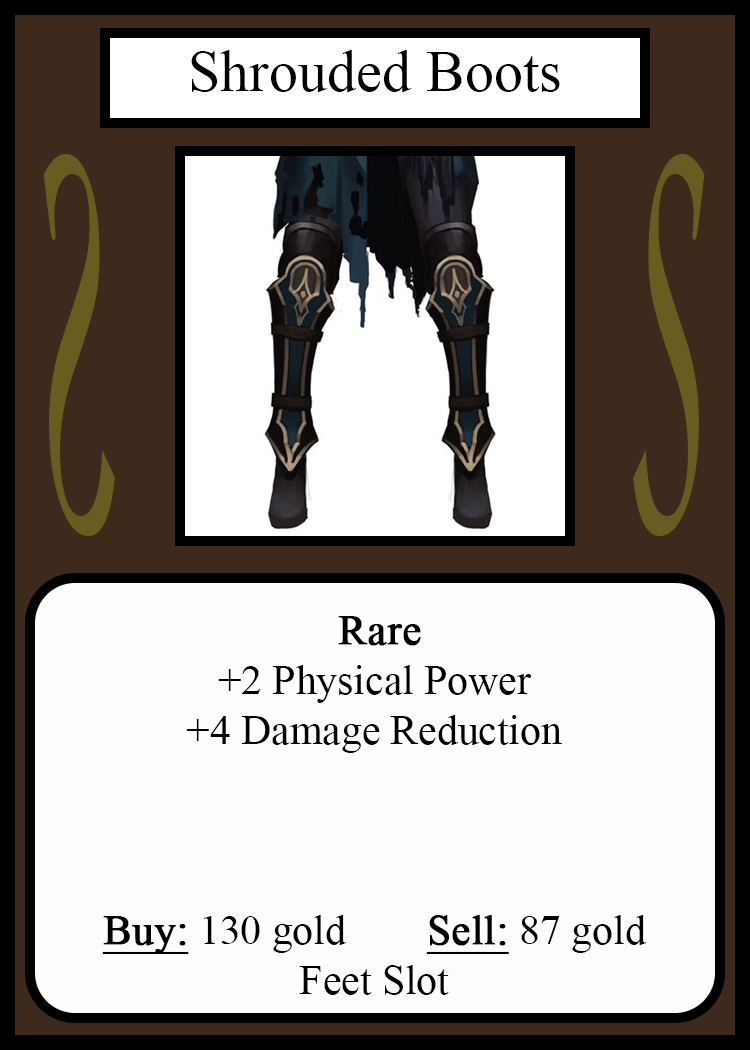
<style>
.page{position:relative;width:750px;height:1050px;background:#fffcfc}
.page>*{position:absolute;margin:0}
.t1{font:58.3px "TimesNewRomanPSMT";color:#010101}
.t2{font:548.5px "Apple-Chancery";color:#6a5c21;scale:0.27 1}
.t3{font:548.2px "Apple-Chancery";color:#6a5c21;scale:0.27 1}
.t4{font:41.7px "TimesNewRomanPSMT";color:#000000}
.t5{font:41.7px "TimesNewRomanPSMT";color:#000000;font-weight:bold}
.t6{font:41.7px "TimesNewRomanPSMT";color:#000000;font-weight:bold;text-decoration:underline}
</style>
<div class="page">
<p class="t1" style="left:191px;top:50px;width:369px;height:42px">Shrouded Boots</p>
<p class="t2" style="left:43px;top:154px;width:72px;height:382px;rotate:180deg">S</p>
<p class="t3" style="left:633px;top:154px;width:72px;height:382px">S</p>
<p class="t4" style="left:102px;top:616px;width:545px;height:379px;text-align:center"><span class="t5"> Rare<br></span>+2 Physical Power<br>+4 Damage Reduction<br><br><br><br><span class="t6">Buy:</span> 130 gold   <span class="t6">Sell:</span> 87 gold<br>Feet Slot</p>
</div>
